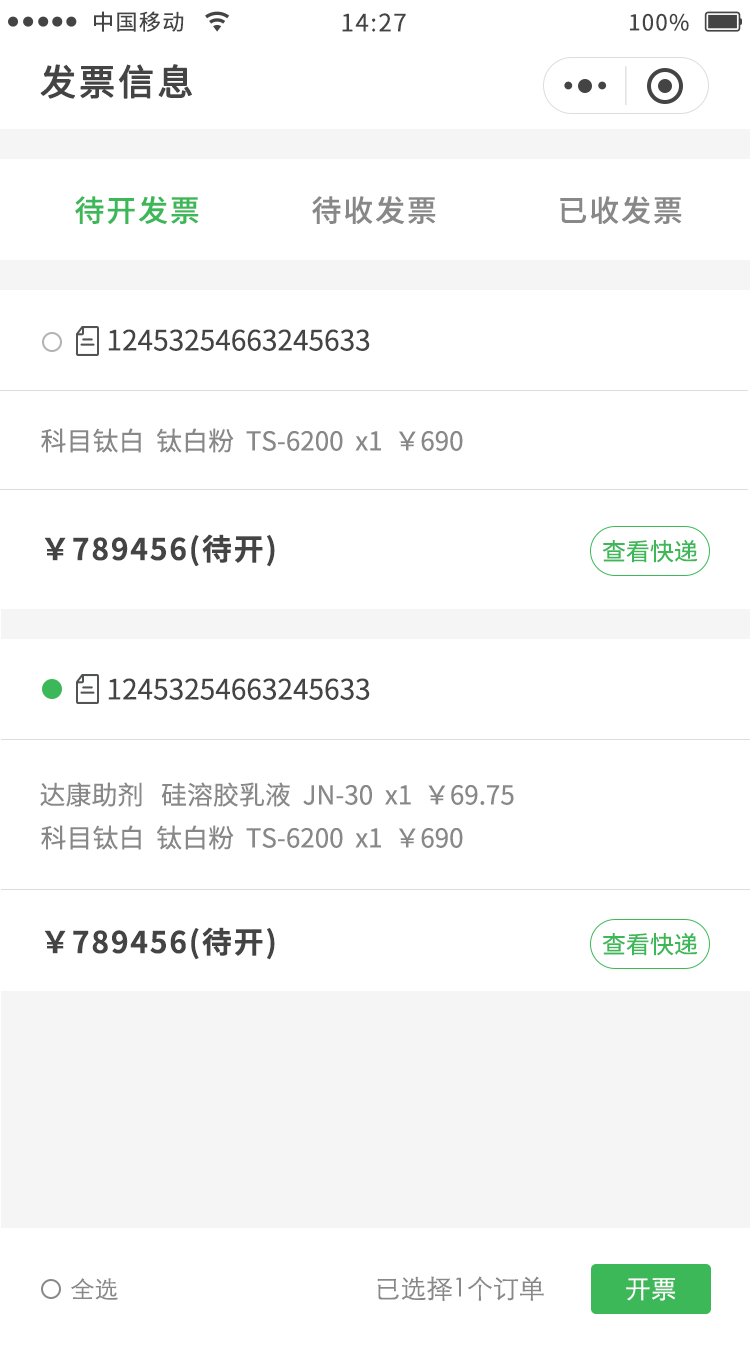
<style>
.page{position:relative;width:750px;height:1347px;background:#ffffff}
.page>*{position:absolute;margin:0}
.t1{font:22px "NotoSansCJKsc-Regular";letter-spacing:0.06em;color:#444444}
.t2{font:24px "NotoSansCJKsc-Regular";letter-spacing:0.06em;color:#444444}
.t3{font:36px "NotoSansCJKsc-Regular";letter-spacing:0.06em;color:#444444;font-weight:bold}
.t4{font:30px "NotoSansCJKsc-Medium";letter-spacing:0.06em;color:#3db858}
.t5{font:30px "NotoSansCJKsc-Medium";letter-spacing:0.06em;color:#888888}
.t6{font:28px "NotoSansCJKsc-Regular";color:#444444}
.t7{font:26px "NotoSansCJKsc-Regular";color:#888888}
.t8{font:30px "NotoSansCJKsc-Bold";letter-spacing:0.06em;color:#444444}
.t9{font:24px "NotoSansCJKsc-Regular";color:#3db858}
.t10{font:24px "STXihei";color:#888888}
.t11{font:26px "STXihei";color:#888888}
.t12{font:26px "STXihei";color:#ffffff}
</style>
<div class="page">
<p class="t1" style="left:94px;top:11px;width:90px;height:21px">中国移动</p>
<p class="t2" style="left:342px;top:13px;width:64px;height:19px">14:27</p>
<p class="t1" style="left:630px;top:13px;width:59px;height:18px">100%</p>
<p class="t3" style="left:40px;top:64px;width:152px;height:35px">发票信息</p>
<p class="t4" style="left:75px;top:196px;width:124px;height:28px">待开发票</p>
<p class="t5" style="left:312px;top:196px;width:124px;height:28px">待收发票</p>
<p class="t5" style="left:560px;top:196px;width:122px;height:28px">已收发票</p>
<p class="t6" style="left:108px;top:329px;width:262px;height:22px">12453254663245633</p>
<p class="t7" style="left:41px;top:428px;width:422px;height:25px">科目钛白  钛白粉  TS-6200  x1  ￥690</p>
<p class="t8" style="left:44px;top:534px;width:231px;height:33px">￥789456(待开)</p>
<p class="t9" style="left:602px;top:540px;width:96px;height:23px">查看快递</p>
<p class="t6" style="left:108px;top:678px;width:262px;height:22px">12453254663245633</p>
<p class="t7" style="left:40px;top:782px;width:474px;height:25px">达康助剂   硅溶胶乳液  JN-30  x1  ￥69.75</p>
<p class="t7" style="left:41px;top:825px;width:422px;height:25px">科目钛白  钛白粉  TS-6200  x1  ￥690</p>
<p class="t8" style="left:44px;top:927px;width:231px;height:33px">￥789456(待开)</p>
<p class="t9" style="left:602px;top:933px;width:96px;height:23px">查看快递</p>
<p class="t10" style="left:71px;top:1278px;width:47px;height:22px">全选</p>
<p class="t11" style="left:377px;top:1276px;width:167px;height:25px">已选择1个订单</p>
<p class="t12" style="left:626px;top:1278px;width:49px;height:23px">开票</p>
</div>
